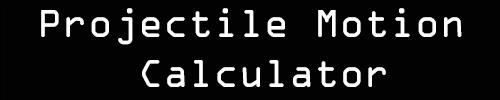
<style>
.page{position:relative;width:500px;height:100px;background:#020202}
.page>*{position:absolute;margin:0}
.t1{font:41.7px "OCRAExtended";color:#ffffff}
</style>
<div class="page">
<p class="t1" style="left:41px;top:8px;width:421px;height:79px;text-align:center">Projectile Motion<br> Calculator</p>
</div>
